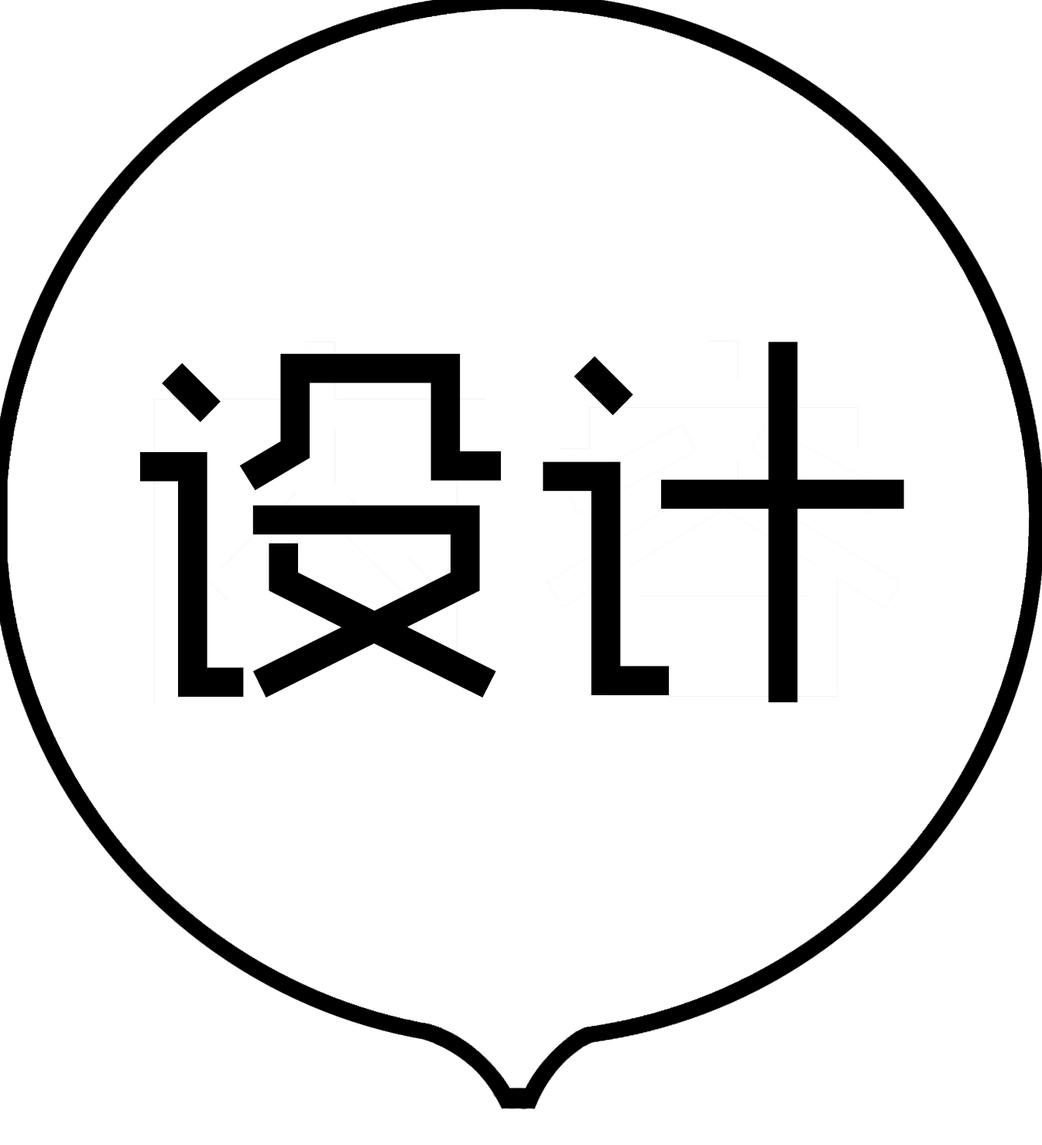
<style>
.page{position:relative;width:1042px;height:1145px;background:#ffffff}
.page>*{position:absolute;margin:0}
.t1{font:403.1px "RTWSShangGoG0v1-Regular";color:#000000}
</style>
<div class="page">
<p class="t1" style="left:140px;top:341px;width:764px;height:362px">设计</p>
</div>
